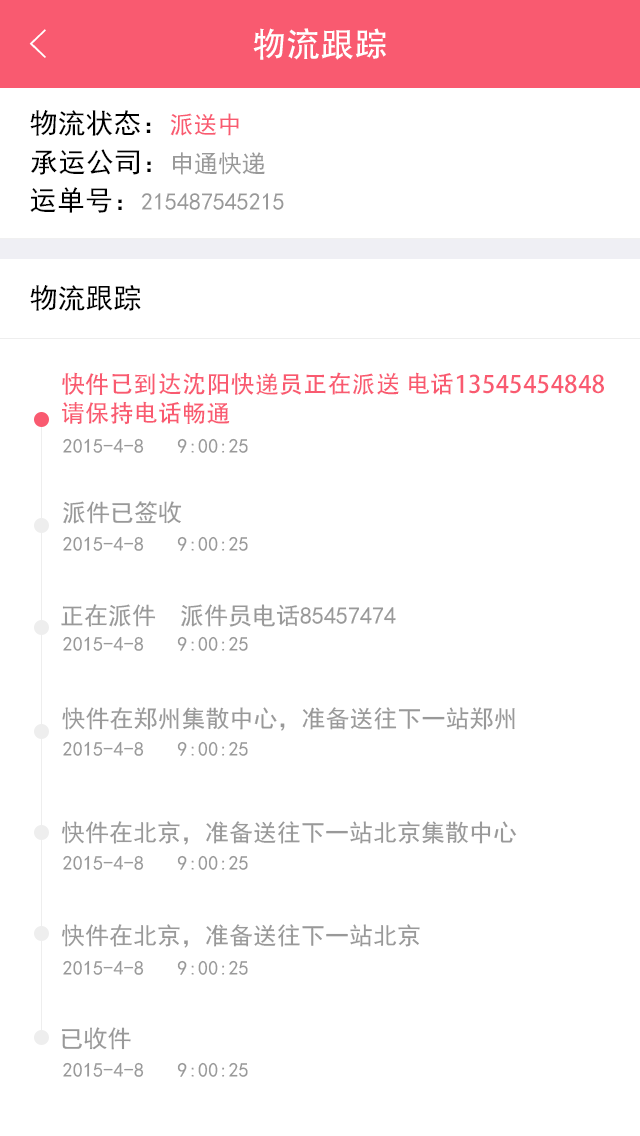
<style>
.page{position:relative;width:640px;height:1136px;background:#ffffff}
.page>*{position:absolute;margin:0}
.t1{font:40px "FZYXJW--GB1-0";color:#ffffff}
.t2{font:34px "AdobeHeitiStd-Regular";color:#ffffff}
.t3{font:28px "SimHei";color:#000000}
.t4{font:24px "SimHei";color:#f95a70}
.t5{font:24px "SimHei";color:#999999}
.t6{font:24px "AdobeHeitiStd-Regular";letter-spacing:0.01em;color:#f95a70}
.t7{font:20px "SimHei";letter-spacing:0.01em;color:#999999}
</style>
<div class="page">
<p class="t1" style="left:29px;top:29px;width:17px;height:29px">&lt;</p>
<p class="t2" style="left:253px;top:28px;width:133px;height:32px">物流跟踪</p>
<p class="t3" style="left:30px;top:110px;width:209px;height:26px">物流状态：<span class="t4">派送中</span></p>
<p class="t3" style="left:31px;top:149px;width:234px;height:26px">承运公司：<span class="t5">申通快递</span></p>
<p class="t5" style="left:30px;top:187px;width:254px;height:26px"><span class="t3">运单号：</span>215487545215</p>
<p class="t3" style="left:30px;top:285px;width:111px;height:26px">物流跟踪</p>
<p class="t6" style="left:62px;top:372px;width:542px;height:53px">快件已到达沈阳快递员正在派送 电话13545454848<br>请保持电话畅通</p>
<p class="t7" style="left:63px;top:438px;width:81px;height:15px">2015-4-8</p>
<p class="t7" style="left:177px;top:438px;width:71px;height:15px">9:00:25</p>
<p class="t5" style="left:63px;top:501px;width:119px;height:23px">派件已签收</p>
<p class="t7" style="left:63px;top:536px;width:81px;height:15px">2015-4-8</p>
<p class="t7" style="left:177px;top:536px;width:71px;height:15px">9:00:25</p>
<p class="t5" style="left:61px;top:604px;width:335px;height:23px">正在派件  派件员电话85457474</p>
<p class="t7" style="left:63px;top:636px;width:81px;height:15px">2015-4-8</p>
<p class="t7" style="left:177px;top:636px;width:71px;height:15px">9:00:25</p>
<p class="t5" style="left:62px;top:707px;width:453px;height:24px">快件在郑州集散中心，准备送往下一站郑州</p>
<p class="t7" style="left:63px;top:741px;width:81px;height:15px">2015-4-8</p>
<p class="t7" style="left:177px;top:741px;width:71px;height:15px">9:00:25</p>
<p class="t5" style="left:61px;top:821px;width:456px;height:24px">快件在北京，准备送往下一站北京集散中心</p>
<p class="t7" style="left:63px;top:855px;width:81px;height:15px">2015-4-8</p>
<p class="t7" style="left:177px;top:855px;width:71px;height:15px">9:00:25</p>
<p class="t5" style="left:61px;top:924px;width:359px;height:24px">快件在北京，准备送往下一站北京</p>
<p class="t7" style="left:63px;top:960px;width:81px;height:15px">2015-4-8</p>
<p class="t7" style="left:177px;top:960px;width:71px;height:15px">9:00:25</p>
<p class="t5" style="left:61px;top:1027px;width:70px;height:23px">已收件</p>
<p class="t7" style="left:63px;top:1062px;width:81px;height:15px">2015-4-8</p>
<p class="t7" style="left:177px;top:1062px;width:71px;height:15px">9:00:25</p>
</div>
